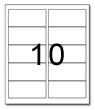
<style>
.page{position:relative;width:95px;height:110px;background:#ffffff}
.page>*{position:absolute;margin:0}
.t1{font:30px "ArialMT";letter-spacing:0.09em;color:#000000}
</style>
<div class="page">
<p class="t1" style="left:32px;top:43px;width:32px;height:23px">10</p>
</div>
